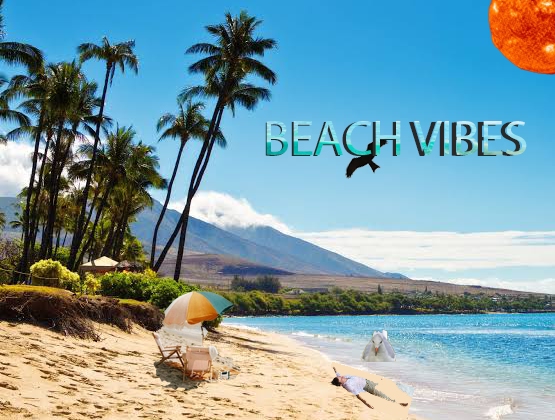
<style>
.page{position:relative;width:555px;height:420px}
.page>*{position:absolute;margin:0}
.t1{font:49.7px "MyriadPro-Regular"}
.t2{font:50.1px "MyriadPro-Regular"}
</style>
<div class="page">
<p class="t1" style="left:265px;top:122px;width:255px;height:34px">BEACH VIBES</p>
<p class="t2" style="left:266px;top:121px;width:261px;height:34px">BEACH VIBES</p>
</div>
